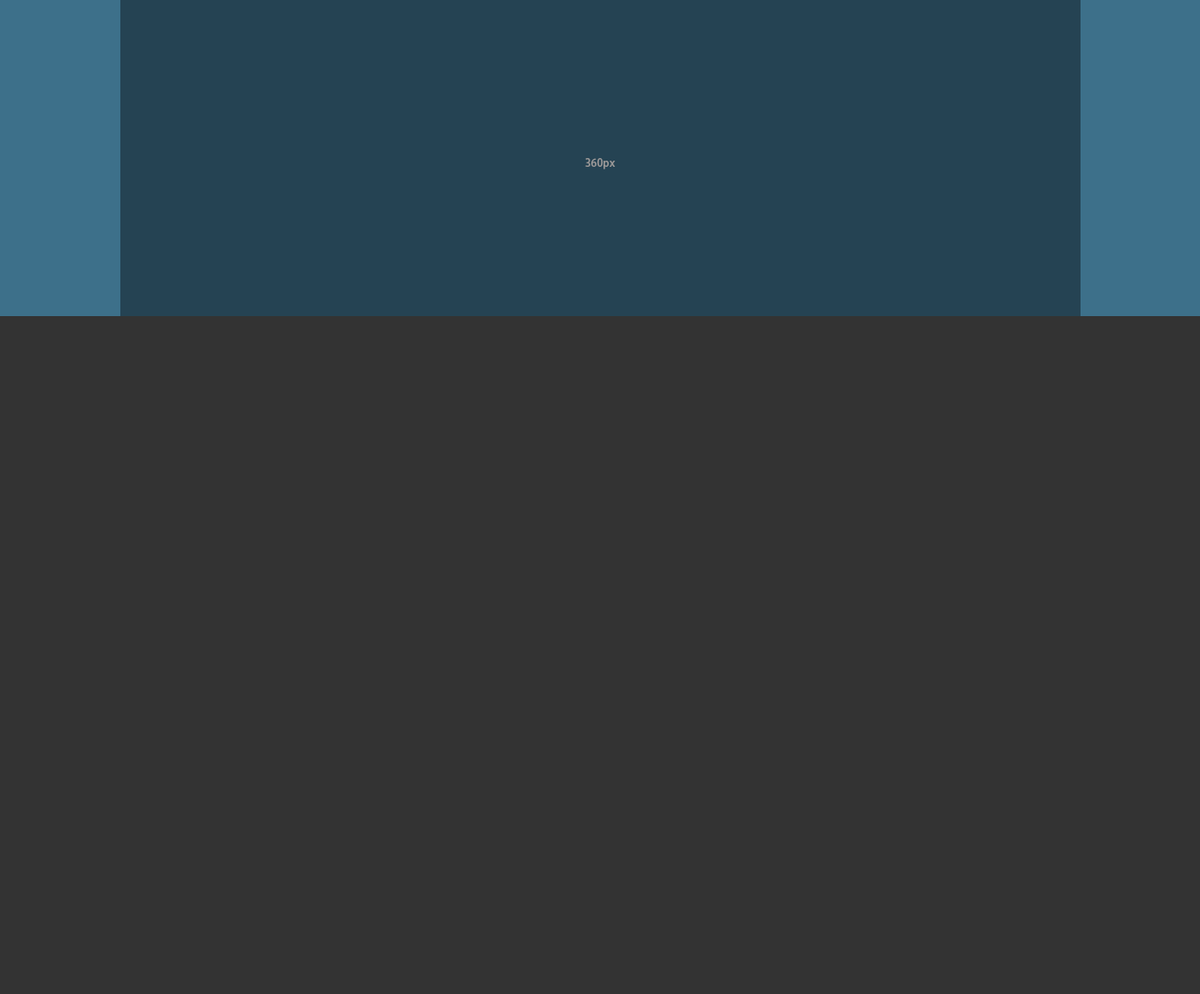
<style>
.page{position:relative;width:1200px;height:994px;background:#333333}
.page>*{position:absolute;margin:0}
.t1{font:10.5px "AdobeHeitiStd-Regular";color:#999898}
</style>
<div class="page">
<p class="t1" style="left:585px;top:158px;width:30px;height:11px">360px</p>
</div>
